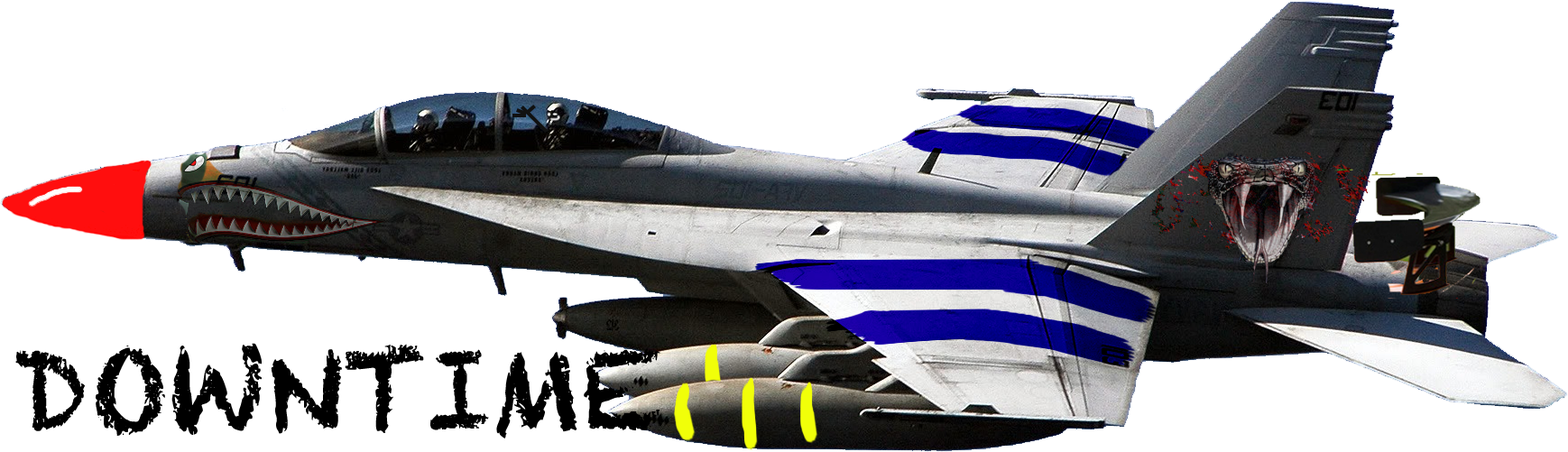
<style>
.page{position:relative;width:1568px;height:452px;background:#ffffff}
.page>*{position:absolute;margin:0}
.t1{font:108.3px "Chalkduster";color:#000000}
</style>
<div class="page">
<p class="t1" style="left:15px;top:343px;width:646px;height:95px">DOWNTIME</p>
</div>
